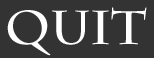
<style>
.page{position:relative;width:154px;height:58px;background:#333333}
.page>*{position:absolute;margin:0}
.t1{font:47.5px "CharlemagneStd-Bold";color:#ffffff}
</style>
<div class="page">
<p class="t1" style="left:7px;top:7px;width:140px;height:49px">QUIT</p>
</div>
